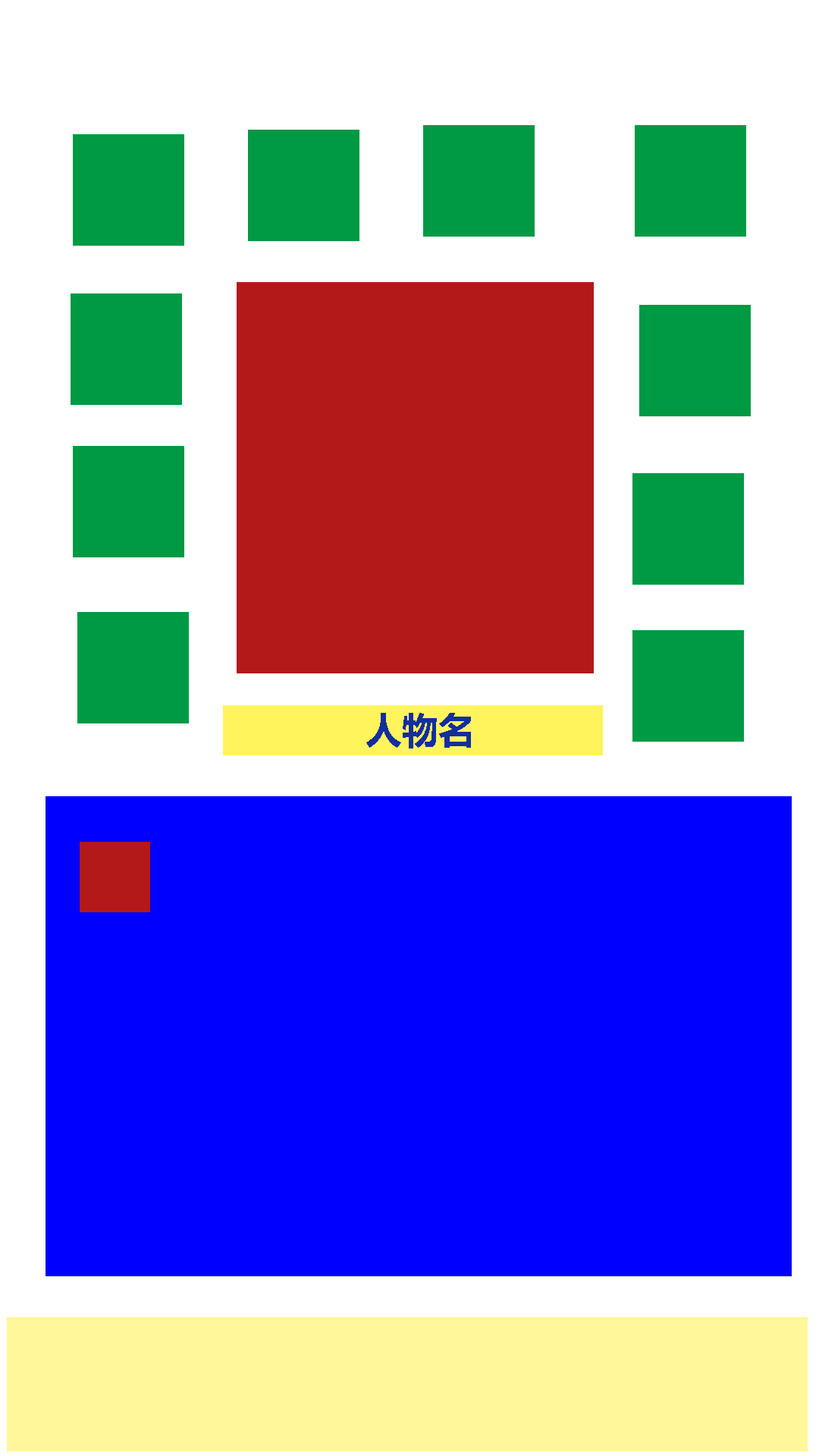
<style>
.page{position:relative;width:819px;height:1456px;background:#ffffff}
.page>*{position:absolute;margin:0}
.t1{font:36.4px "MicrosoftYaHei-Bold";color:#132e9f}
</style>
<div class="page">
<p class="t1" style="left:366px;top:713px;width:105px;height:35px">人物名</p>
</div>
